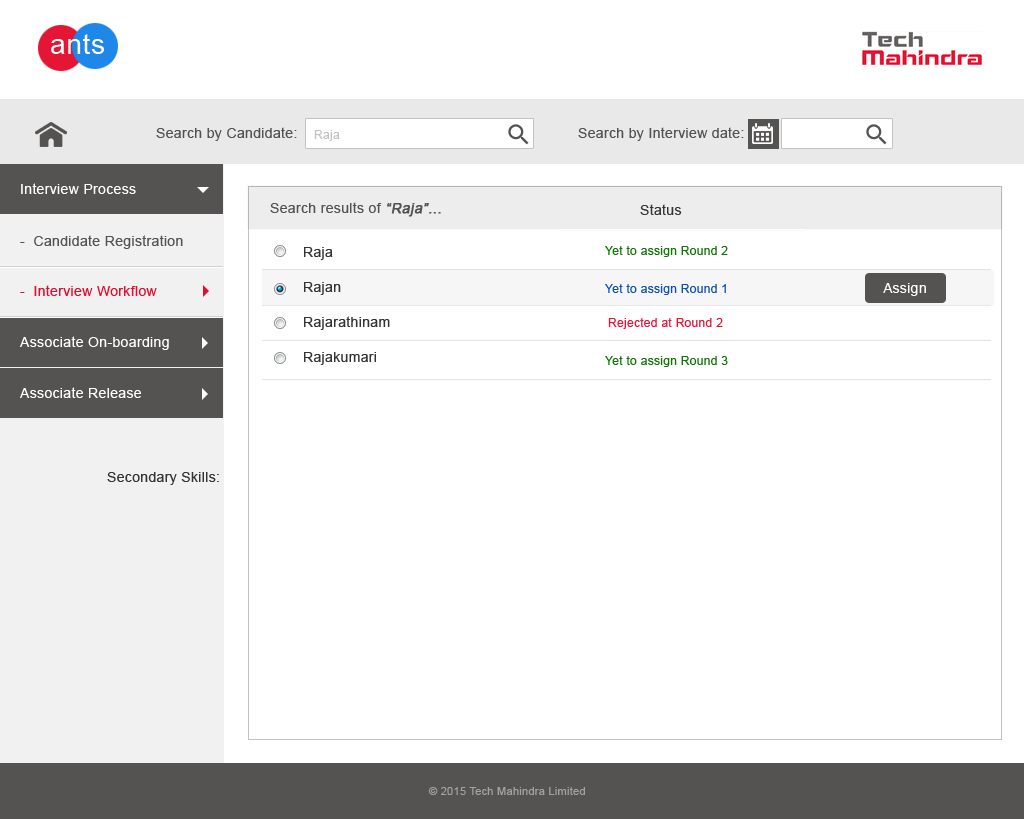
<style>
.page{position:relative;width:1024px;height:819px;background:#ffffff}
.page>*{position:absolute;margin:0}
.t1{font:28px "ArialMT";letter-spacing:0.025em;color:#ffffff}
.t2{font:14px "ArialMT";letter-spacing:0.025em;color:#555252}
.t3{font:12px "ArialMT";letter-spacing:0.025em;color:#c3c3c3}
.t4{font:14px "ArialMT";letter-spacing:0.025em;color:#ffffff}
.t5{font:14px "ArialMT";letter-spacing:0.025em;color:#555252;font-weight:bold;font-style:italic}
.t6{font:14px "ArialMT";letter-spacing:0.025em;color:#333333}
.t7{font:12px "ArialMT";letter-spacing:0.025em;color:#107505}
.t8{font:14px/35px "ArialMT";letter-spacing:0.025em;color:#333333}
.t9{font:14px "ArialMT";letter-spacing:0.025em;color:#e40d2e}
.t10{font:12px "ArialMT";letter-spacing:0.025em;color:#0f50b2}
.t11{font:12px "ArialMT";letter-spacing:0.025em;color:#e51635}
.t12{font:11px "ArialMT";letter-spacing:0.025em;color:#a3a2a2}
</style>
<div class="page">
<p class="t1" style="left:51px;top:34px;width:53px;height:20px">ants</p>
<p class="t2" style="left:156px;top:127px;width:141px;height:14px">Search by Candidate:</p>
<p class="t3" style="left:314px;top:130px;width:26px;height:11px">Raja</p>
<p class="t2" style="left:578px;top:127px;width:166px;height:14px">Search by Interview date:</p>
<p class="t4" style="left:21px;top:183px;width:115px;height:11px">Interview Process</p>
<p class="t2" style="left:270px;top:202px;width:171px;height:15px">Search results of <span class="t5">“Raja”...</span></p>
<p class="t6" style="left:640px;top:204px;width:42px;height:11px">Status</p>
<p class="t2" style="left:20px;top:235px;width:163px;height:14px">-  Candidate Registration</p>
<p class="t7" style="left:605px;top:246px;width:123px;height:11px">Yet to assign Round 2</p>
<p class="t8" style="left:304px;top:247px;width:86px;height:118px">Raja<br>Rajan<br>Rajarathinam<br>Rajakumari</p>
<p class="t9" style="left:20px;top:285px;width:137px;height:11px">-  Interview Workflow</p>
<p class="t10" style="left:605px;top:284px;width:121px;height:11px">Yet to assign Round 1</p>
<p class="t4" style="left:883px;top:283px;width:43px;height:13px">Assign</p>
<p class="t11" style="left:608px;top:318px;width:115px;height:11px">Rejected at Round 2</p>
<p class="t4" style="left:20px;top:336px;width:149px;height:14px">Associate On-boarding</p>
<p class="t7" style="left:605px;top:356px;width:123px;height:11px">Yet to assign Round 3</p>
<p class="t4" style="left:20px;top:387px;width:121px;height:11px">Associate Release</p>
<p class="t6" style="left:107px;top:472px;width:112px;height:13px">Secondary Skills:</p>
<p class="t12" style="left:428px;top:787px;width:157px;height:8px">© 2015 Tech Mahindra Limited</p>
</div>
